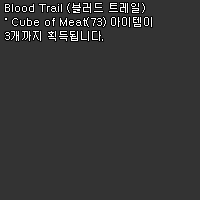
<style>
.page{position:relative;width:200px;height:200px;background:#333333}
.page>*{position:absolute;margin:0}
.t1{font:11px/14px "Dotum";color:#ffffff}
</style>
<div class="page">
<p class="t1" style="left:5px;top:3px;width:147px;height:38px">Blood Trail (블러드 트레일)<br>˚ Cube of Meat(73) 아이템이 <br>3개까지 획득됩니다.</p>
</div>
